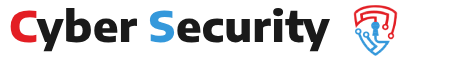
<style>
.page{position:relative;width:468px;height:60px;background:#ffffff}
.page>*{position:absolute;margin:0}
.t1{font:42.2px "EncodeSansSemiExpanded-ExtraBold";color:#1a1a1a}
.t2{font:42.2px "EncodeSansSemiExpanded-ExtraBold";color:#e31e24}
.t3{font:42.2px "EncodeSansSemiExpanded-ExtraBold";color:#3498db}
</style>
<div class="page">
<p class="t1" style="left:10px;top:7px;width:320px;height:45px"><span class="t2">C</span>yber <span class="t3">S</span>ecurity</p>
</div>
